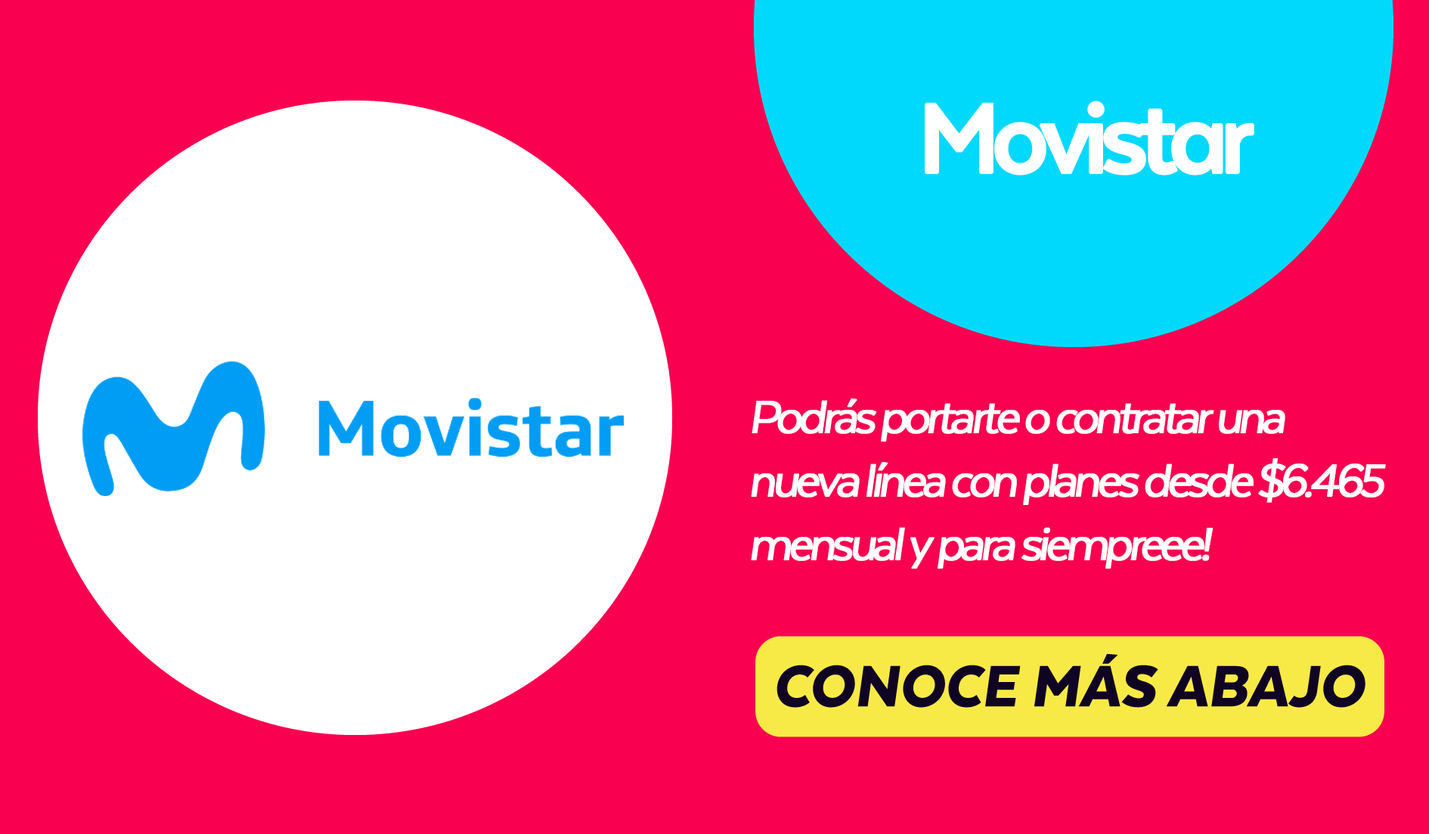
<style>
.page{position:relative;width:1429px;height:834px;background:#fa0050}
.page>*{position:absolute;margin:0}
.t1{font:113.4px "TextaAlt-Bold";letter-spacing:-0.1em;color:#ffffff;font-weight:bold}
.t2{font:37.8px "TextaAlt-Italic";letter-spacing:-0.1em;color:#fa0050;font-weight:bold}
.t3{font:52.9px "TextaAlt-Italic";letter-spacing:-0.1em;color:#ffffff;font-weight:bold}
.t4{font:52.9px "TextaAlt-Italic";letter-spacing:-0.1em;color:#fa0050;font-weight:bold}
</style>
<div class="page">
<p class="t1" style="left:925px;top:101px;width:330px;height:74px">Movistar</p>
<p class="t2" style="left:751px;top:399px;width:635px;height:170px"><span class="t3">Podrás portarte o contratar una nueva línea con planes desde $6.465 mensual y para siempreee! </span><span class="t4">t </span>dolore magna aliqua. Quis ipsum suspendisse ultrices gravida. Risus commodo viverra maecenas accumsan lacus vel facilisis.</p>
</div>
